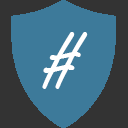
<style>
.page{position:relative;width:128px;height:128px;background:#3d7a9a}
.page>*{position:absolute;margin:0}
.t1{font:100px "FreestyleScript-Regular";color:#ffffff}
</style>
<div class="page">
<p class="t1" style="left:42px;top:32px;width:46px;height:57px">#</p>
</div>
